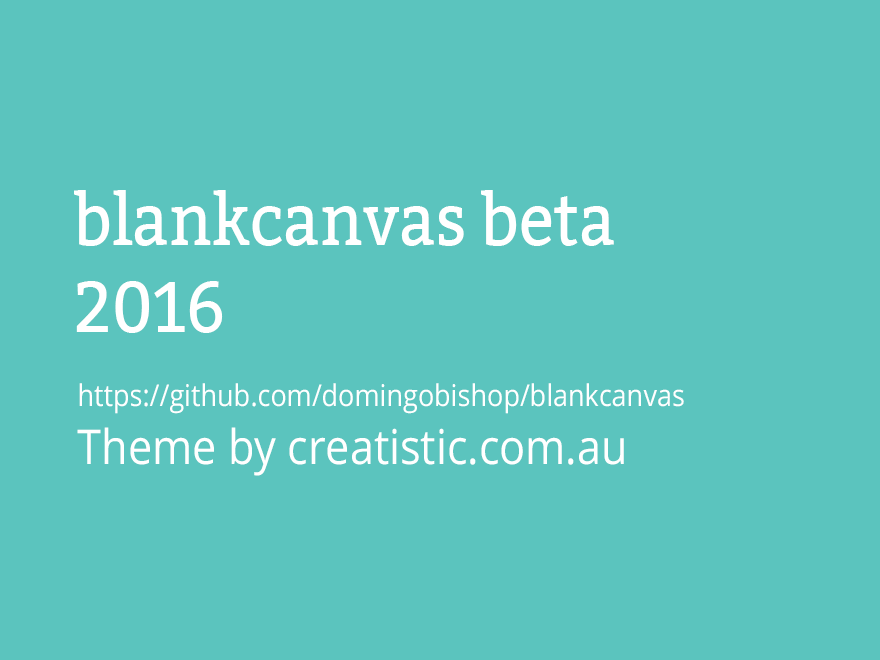
<style>
.page{position:relative;width:880px;height:660px;background:#5bc4be}
.page>*{position:absolute;margin:0}
.t1{font:72px "Bitter-Regular";color:#ffffff;scale:0.9 1}
.t2{font:30px "OpenSans";color:#ffffff;scale:0.9 1}
.t3{font:48px "OpenSans";color:#ffffff;scale:0.9 1}
</style>
<div class="page">
<p class="t1" style="left:74px;top:190px;width:540px;height:143px">blankcanvas beta <br>2016</p>
<p class="t2" style="left:77px;top:383px;width:607px;height:93px">https://github.com/domingobishop/blankcanvas<br><span class="t3">Theme by creatistic.com.au</span></p>
</div>
